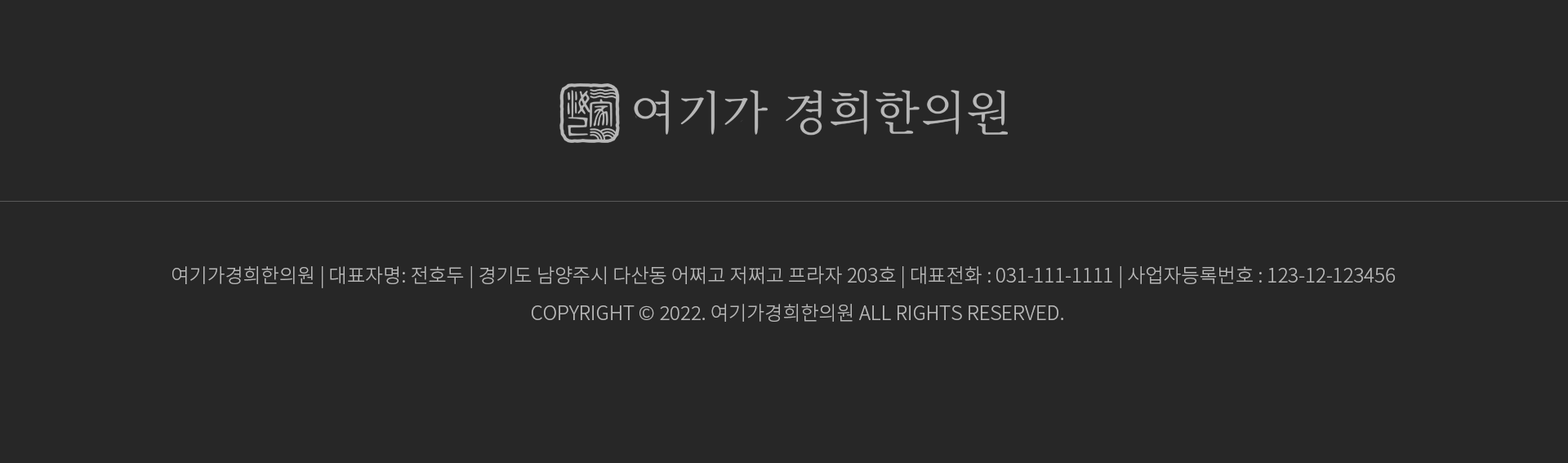
<style>
.page{position:relative;width:1568px;height:463px;background:#272727}
.page>*{position:absolute;margin:0}
.t1{font:19.6px "NotoSansKR-Light";color:#b7b7b7}
</style>
<div class="page">
<p class="t1" style="left:172px;top:265px;width:1223px;height:23px">여기가경희한의원 | 대표자명: 전호두 | 경기도 남양주시 다산동 어쩌고 저쩌고 프라자 203호 | 대표전화 : 031-111-1111 | 사업자등록번호 : 123-12-123456</p>
<p class="t1" style="left:532px;top:304px;width:531px;height:18px">COPYRIGHT © 2022. 여기가경희한의원 ALL RIGHTS RESERVED.</p>
</div>
